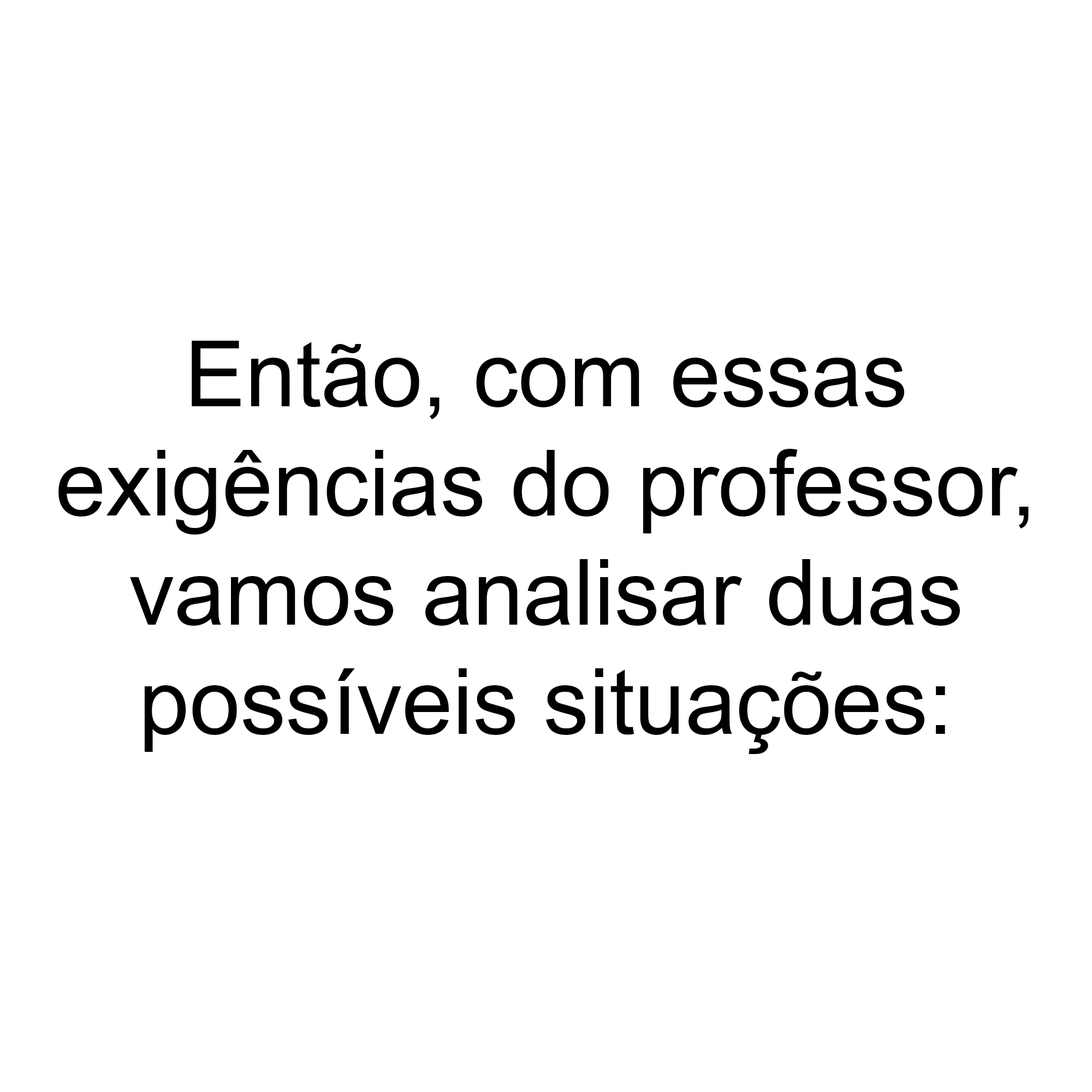
<style>
.page{position:relative;width:1092px;height:1092px;background:#ffffff}
.page>*{position:absolute;margin:0}
.t1{font:91px "ArialMT";color:#000000}
</style>
<div class="page">
<p class="t1" style="left:58px;top:341px;width:971px;height:413px;text-align:center">Então, com essas<br>exigências do professor,<br>vamos analisar duas<br>possíveis situações:</p>
</div>
